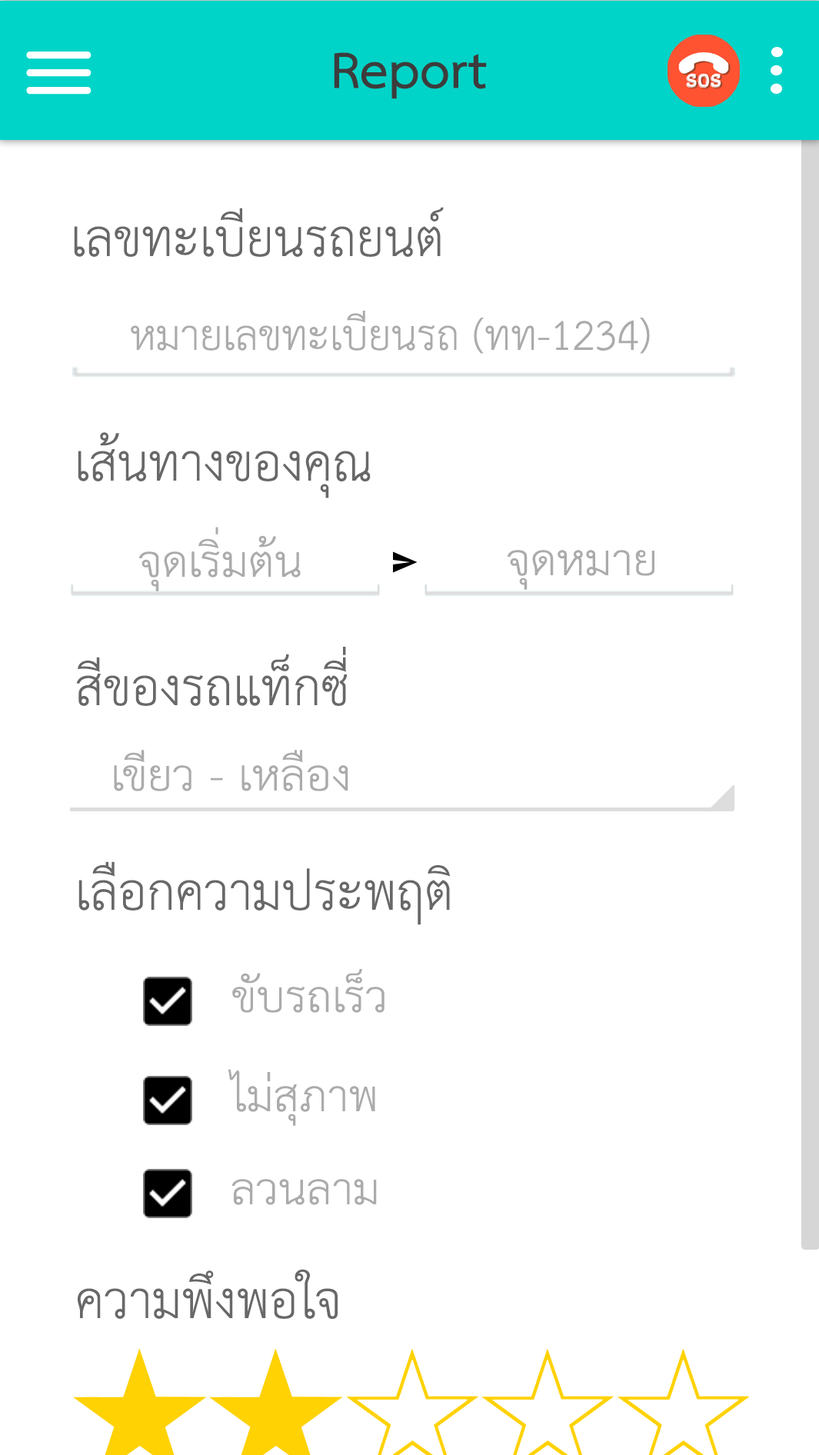
<style>
.page{position:relative;width:819px;height:1455px;background:#ffffff}
.page>*{position:absolute;margin:0}
.t1{font:73.4px "THSarabunPSK-Bold";color:#3c3c3c}
.t2{font:73.9px "THSarabunPSK";color:#686868}
.t3{font:60.4px "THSarabunPSK";color:#ababab}
.t4{font:62.4px "THSarabunPSK";color:#ababab;scale:1.07 1}
</style>
<div class="page">
<p class="t1" style="left:334px;top:52px;width:153px;height:47px">Report</p>
<p class="t2" style="left:74px;top:207px;width:370px;height:50px">เลขทะเบียนรถยนต์</p>
<p class="t3" style="left:131px;top:311px;width:519px;height:43px">หมายเลขทะเบียนรถ (ทท-1234)</p>
<p class="t2" style="left:78px;top:432px;width:293px;height:66px">เส้นทางของคุณ</p>
<p class="t4" style="left:139px;top:527px;width:162px;height:65px">จุดเริ่มต้น</p>
<p class="t4" style="left:508px;top:550px;width:147px;height:40px">จุดหมาย</p>
<p class="t2" style="left:76px;top:647px;width:272px;height:59px">สีของรถแท็กซี่</p>
<p class="t4" style="left:114px;top:750px;width:234px;height:42px">เขียว - เหลือง</p>
<p class="t2" style="left:78px;top:862px;width:372px;height:63px">เลือกความประพฤติ</p>
<p class="t4" style="left:232px;top:969px;width:153px;height:44px">ขับรถเร็ว</p>
<p class="t4" style="left:228px;top:1069px;width:147px;height:57px">ไม่สุภาพ</p>
<p class="t4" style="left:232px;top:1179px;width:145px;height:26px">ลวนลาม</p>
<p class="t2" style="left:78px;top:1269px;width:260px;height:50px">ความพึงพอใจ</p>
</div>
